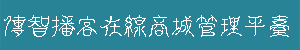
<style>
.page{position:relative;width:300px;height:50px;background:#298396}
.page>*{position:absolute;margin:0}
.t1{font:24px "IDDraginZhuan";color:#fefefe}
</style>
<div class="page">
<p class="t1" style="left:4px;top:15px;width:285px;height:22px">傳智播客在線商城管理平臺</p>
</div>
